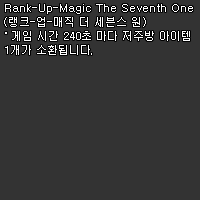
<style>
.page{position:relative;width:200px;height:200px;background:#333333}
.page>*{position:absolute;margin:0}
.t1{font:11px/14px "Dotum";color:#ffffff}
</style>
<div class="page">
<p class="t1" style="left:4px;top:4px;width:189px;height:51px">Rank-Up-Magic The Seventh One<br>(랭크-업-매직 더 세븐스 원)<br>˚ 게임 시간 240초 마다 저주방 아이템<br>1개가 소환됩니다.</p>
</div>
